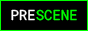
<style>
.page{position:relative;width:88px;height:31px;background:#000000}
.page>*{position:absolute;margin:0}
.t1{font:14px "RobotoMono-Regular";color:#00ff00}
.t2{font:14px "RobotoMono-Regular";color:#ffffff}
</style>
<div class="page">
<p class="t1" style="left:11px;top:9px;width:66px;height:12px"><span class="t2">PRE</span>SCENE</p>
</div>
